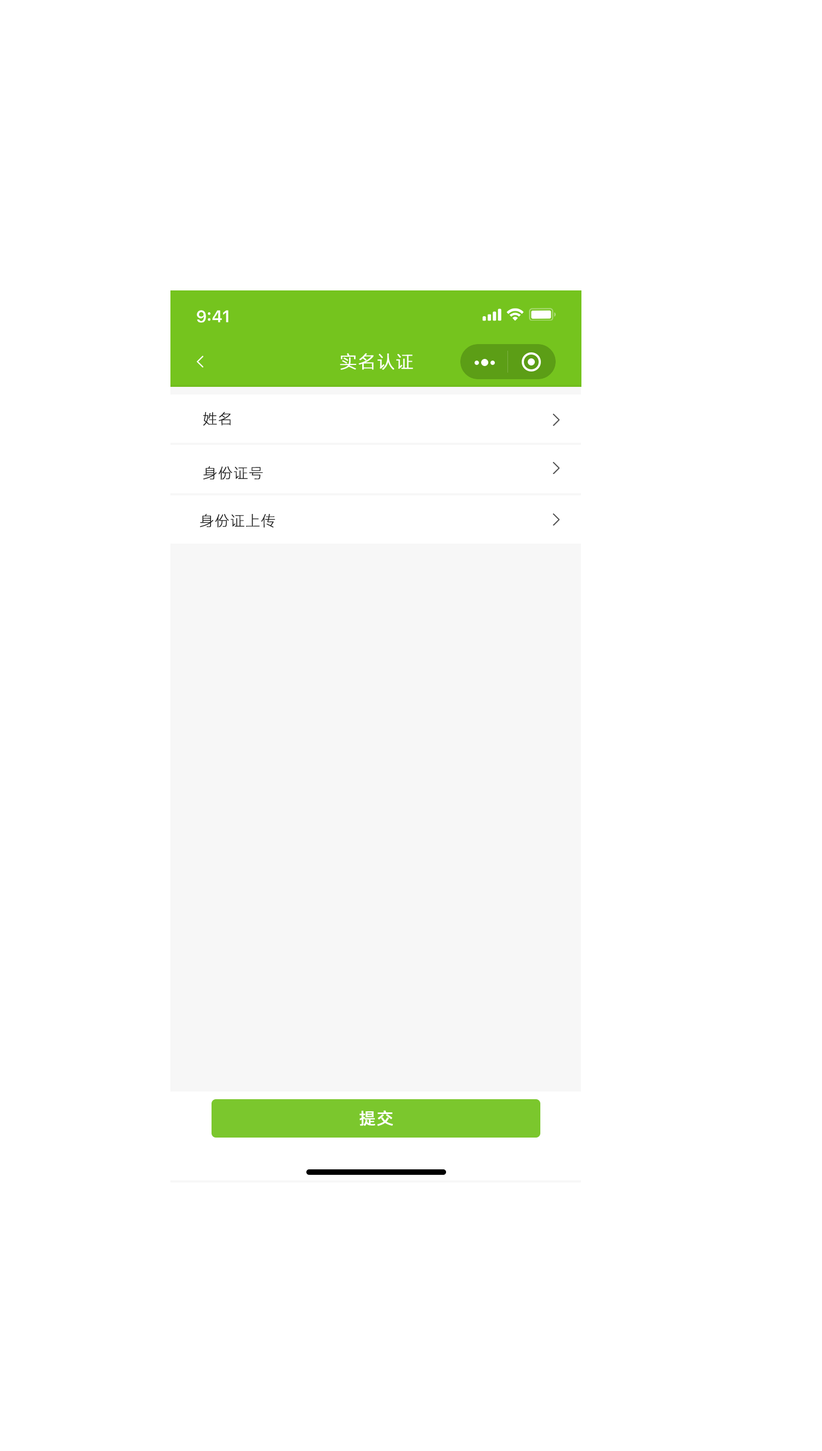
<style>
.page{position:relative;width:822px;height:1451px;background:#ffffff}
.page>*{position:absolute;margin:0}
.t1{font:17.5px "HarmonyOS_Sans_SC_Light";letter-spacing:0.04em;color:#ffffff;text-transform:uppercase;font-weight:bold}
.t2{font:14.2px "HarmonyOS_Sans_SC_Thin";letter-spacing:0.04em;color:#1c1c1c;text-transform:uppercase;font-weight:bold}
.t3{font:16.4px "HarmonyOS_Sans_SC";letter-spacing:0.04em;color:#ffffff;text-transform:uppercase;font-weight:bold}
</style>
<div class="page">
<p class="t1" style="left:340px;top:353px;width:73px;height:17px">实名认证</p>
<p class="t2" style="left:203px;top:411px;width:28px;height:15px">姓名</p>
<p class="t2" style="left:203px;top:466px;width:60px;height:14px">身份证号</p>
<p class="t2" style="left:200px;top:513px;width:75px;height:15px">身份证上传</p>
<p class="t3" style="left:359px;top:1110px;width:34px;height:16px">提交</p>
</div>
